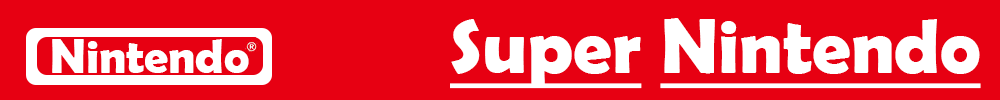
<style>
.page{position:relative;width:1000px;height:100px;background:#e70012}
.page>*{position:absolute;margin:0}
.t1{font:77.1px "BerlinSansFBDemi-Bold";color:#ffffff;text-decoration:underline}
.t2{font:47.9px "BerlinSansFBDemi-Bold";color:#ffffff}
</style>
<div class="page">
<p class="t1" style="left:450px;top:18px;width:531px;height:71px">Super Nintendo</p>
<p class="t2" style="left:52px;top:39px;width:197px;height:34px">Nintendo</p>
</div>
